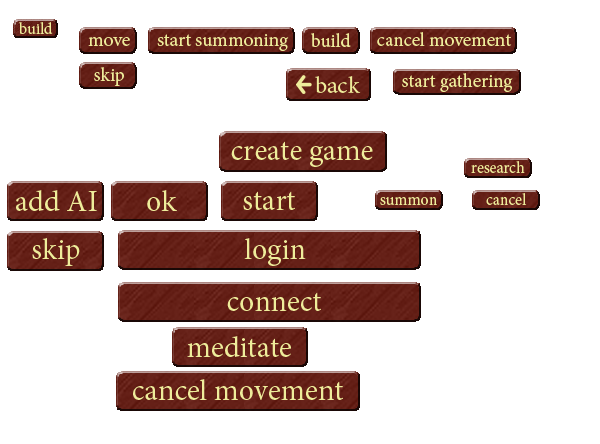
<style>
.page{position:relative;width:600px;height:444px;background:#ffffff}
.page>*{position:absolute;margin:0}
.t1{font:16px "MinionPro-Regular";color:#eeed9b}
.t2{font:19px "MinionPro-Regular";color:#eeed9b}
.t3{font:24px "MinionPro-Regular";color:#eeed9b}
.t4{font:30px "MinionPro-Regular";color:#eeed9b}
</style>
<div class="page">
<p class="t1" style="left:19px;top:22px;width:34px;height:12px">build</p>
<p class="t2" style="left:88px;top:37px;width:42px;height:9px">move</p>
<p class="t2" style="left:157px;top:34px;width:132px;height:17px">start summoning</p>
<p class="t2" style="left:311px;top:33px;width:40px;height:14px">build</p>
<p class="t2" style="left:377px;top:32px;width:135px;height:14px">cancel movement</p>
<p class="t2" style="left:94px;top:67px;width:30px;height:19px">skip</p>
<p class="t3" style="left:315px;top:76px;width:46px;height:17px">back</p>
<p class="t2" style="left:402px;top:73px;width:111px;height:19px">start gathering</p>
<p class="t1" style="left:471px;top:161px;width:54px;height:12px">research</p>
<p class="t4" style="left:16px;top:190px;width:81px;height:21px">add AI</p>
<p class="t4" style="left:243px;top:191px;width:52px;height:19px">start</p>
<p class="t1" style="left:380px;top:197px;width:57px;height:8px">summon</p>
<p class="t1" style="left:486px;top:193px;width:41px;height:12px">cancel</p>
<p class="t4" style="left:32px;top:238px;width:48px;height:28px">skip</p>
<p class="t4" style="left:244px;top:238px;width:62px;height:28px">login</p>
<p class="t4" style="left:227px;top:292px;width:94px;height:19px">connect</p>
<p class="t4" style="left:187px;top:336px;width:104px;height:21px">meditate</p>
<p class="t4" style="left:133px;top:379px;width:210px;height:21px">cancel movement</p>
</div>
